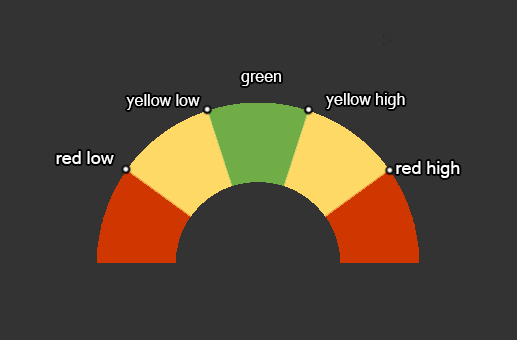
<style>
.page{position:relative;width:517px;height:340px;background:#333333}
.page>*{position:absolute;margin:0}
.t1{font:16px "MicrosoftSansSerif";color:#ffffff}
.t2{font:18px "MicrosoftSansSerif";color:#ffffff}
</style>
<div class="page">
<p class="t1" style="left:241px;top:73px;width:40px;height:13px">green</p>
<p class="t1" style="left:126px;top:94px;width:74px;height:16px">yellow low</p>
<p class="t1" style="left:326px;top:93px;width:79px;height:16px">yellow high</p>
<p class="t2" style="left:56px;top:151px;width:58px;height:13px">red low</p>
<p class="t2" style="left:396px;top:161px;width:64px;height:17px">red high</p>
</div>
